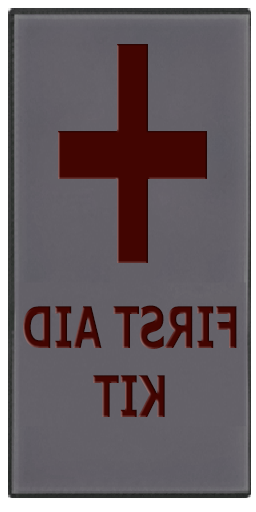
<style>
.page{position:relative;width:256px;height:512px}
.page>*{position:absolute;margin:0}
.t1{font:57.1px "Tahoma-Bold";color:#420501;scale:0.72 1}
</style>
<div class="page">
<p class="t1" style="left:23px;top:305px;width:214px;height:112px;text-align:center;rotate:180deg">FIRST AID<br>KIT</p>
</div>
